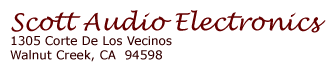
<style>
.page{position:relative;width:333px;height:76px;background:#ffffff}
.page>*{position:absolute;margin:0}
.t1{font:12px "Verdana";color:#330000}
.t2{font:24px "LucidaHandwriting-Italic";color:#660000}
</style>
<div class="page">
<p class="t1" style="left:10px;top:10px;width:316px;height:52px"><span class="t2">Scott Audio Electronics<br></span>1305 Corte De Los Vecinos<br>Walnut Creek, CA  94598</p>
</div>
